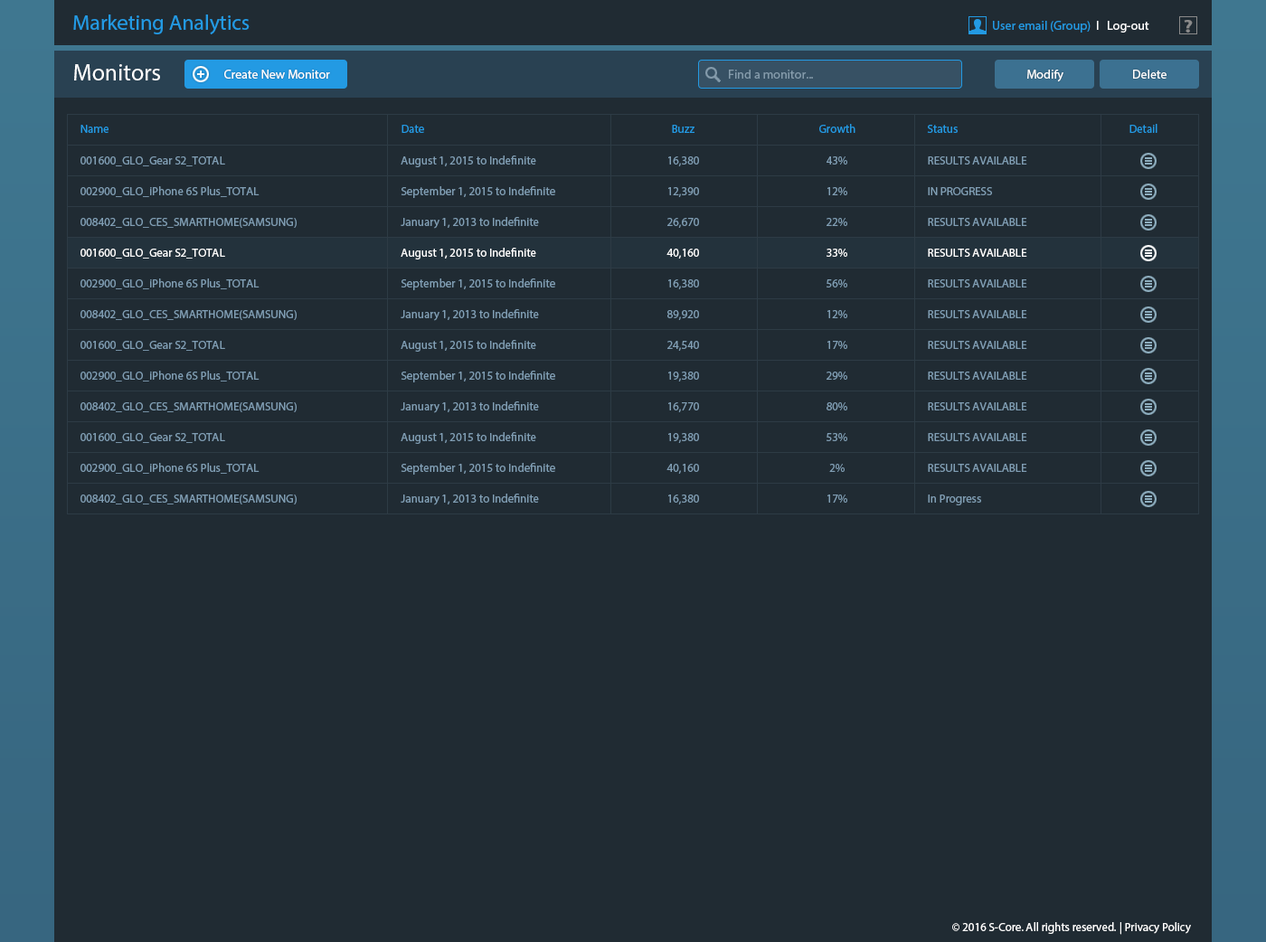
<style>
.page{position:relative;width:1266px;height:942px;background:#202b33}
.page>*{position:absolute;margin:0}
.t1{font:21.5px "MyriadPro-Regular";color:#239ae3}
.t2{font:12.7px "MyriadPro-Regular";color:#239ae3}
.t3{font:12.7px "MyriadPro-Regular";color:#ffffff}
.t4{font:18.1px "MyriadPro-Bold";color:#8a8a8a;scale:1.19 1}
.t5{font:23.5px "MyriadPro-Regular";color:#ffffff}
.t6{font:12.7px "MyriadPro-Regular";color:#849bab}
.t7{font:11.8px "MyriadPro-Regular";color:#239ae3}
.t8{font:11.8px/30.7px "MyriadPro-Regular";color:#809eb4}
.t9{font:11.8px/30.7px "MyriadPro-Regular";color:#ffffff}
.t10{font:11.8px "MyriadPro-Regular";color:#ffffff}
</style>
<div class="page">
<p class="t1" style="left:73px;top:14px;width:177px;height:20px">Marketing Analytics</p>
<p class="t2" style="left:993px;top:21px;width:156px;height:12px">User email (Group) <span class="t3"> l   Log-out</span></p>
<p class="t4" style="left:1183px;top:20px;width:10px;height:13px">?</p>
<p class="t5" style="left:74px;top:64px;width:86px;height:16px">Monitors</p>
<p class="t3" style="left:224px;top:70px;width:106px;height:9px">Create New Monitor</p>
<p class="t6" style="left:729px;top:70px;width:84px;height:9px">Find a monitor...</p>
<p class="t3" style="left:1027px;top:70px;width:36px;height:12px">Modify</p>
<p class="t3" style="left:1133px;top:70px;width:33px;height:9px">Delete</p>
<p class="t7" style="left:80px;top:125px;width:28px;height:8px">Name</p>
<p class="t7" style="left:401px;top:125px;width:23px;height:8px">Date</p>
<p class="t7" style="left:672px;top:125px;width:22px;height:8px">Buzz</p>
<p class="t7" style="left:819px;top:124px;width:36px;height:9px">Growth</p>
<p class="t7" style="left:927px;top:125px;width:30px;height:8px">Status</p>
<p class="t7" style="left:1129px;top:124px;width:28px;height:9px">Detail</p>
<p class="t8" style="left:80px;top:156px;width:217px;height:348px">001600_GLO_Gear S2_TOTAL<br>002900_GLO_iPhone 6S Plus_TOTAL<br>008402_GLO_CES_SMARTHOME(SAMSUNG)<br><span class="t9">001600_GLO_Gear S2_TOTAL<br></span>002900_GLO_iPhone 6S Plus_TOTAL<br>008402_GLO_CES_SMARTHOME(SAMSUNG)<br>001600_GLO_Gear S2_TOTAL<br>002900_GLO_iPhone 6S Plus_TOTAL<br>008402_GLO_CES_SMARTHOME(SAMSUNG)<br>001600_GLO_Gear S2_TOTAL<br>002900_GLO_iPhone 6S Plus_TOTAL<br>008402_GLO_CES_SMARTHOME(SAMSUNG)</p>
<p class="t8" style="left:401px;top:156px;width:154px;height:349px">August 1, 2015 to Indefinite<br>September 1, 2015 to Indefinite<br>January 1, 2013 to Indefinite<br><span class="t9">August 1, 2015 to Indefinite<br></span>September 1, 2015 to Indefinite<br>January 1, 2013 to Indefinite<br>August 1, 2015 to Indefinite<br>September 1, 2015 to Indefinite<br>January 1, 2013 to Indefinite<br>August 1, 2015 to Indefinite<br>September 1, 2015 to Indefinite<br>January 1, 2013 to Indefinite</p>
<p class="t8" style="left:666px;top:156px;width:33px;height:348px;text-align:center">16,380<br>12,390<br>26,670<br><span class="t9">40,160<br></span>16,380<br>89,920<br>24,540<br>19,380<br>16,770<br>19,380<br>40,160<br>16,380</p>
<p class="t8" style="left:826px;top:156px;width:21px;height:347px;text-align:center">43%<br>12%<br>22%<br><span class="t9">33%<br></span>56%<br>12%<br>17%<br>29%<br>80%<br>53%<br>2%<br>17%</p>
<p class="t8" style="left:928px;top:156px;width:99px;height:349px">RESULTS AVAILABLE<br>IN PROGRESS<br>RESULTS AVAILABLE<br><span class="t9">RESULTS AVAILABLE<br></span>RESULTS AVAILABLE<br>RESULTS AVAILABLE<br>RESULTS AVAILABLE<br>RESULTS AVAILABLE<br>RESULTS AVAILABLE<br>RESULTS AVAILABLE<br>RESULTS AVAILABLE<br>In Progress</p>
<p class="t10" style="left:952px;top:922px;width:239px;height:13px">© 2016 S-Core. All rights reserved. | Privacy Policy</p>
</div>
